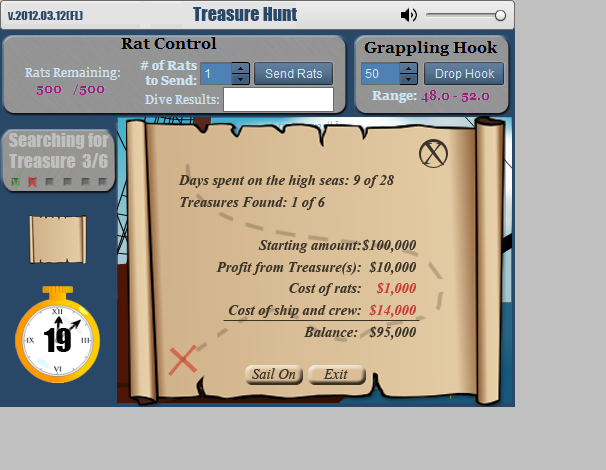
<style>
.page{position:relative;width:606px;height:470px;background:#c0c0c0}
.page>*{position:absolute;margin:0}
.t1{font:12px "Impact";color:#294867}
.t2{font:18px "Impact";color:#294867}
.t3{font:18px "Impact";color:#c0c0c0}
.t4{font:30px "CharlemagneStd-Bold";color:#3a3328}
.t5{font:18px "MyriadPro-Regular";color:#55b948}
.t6{font:20px "MyriadPro-Regular";color:#ef2f2f}
.t7{font:18px "Vijaya-Bold";color:#3a3328}
.t8{font:18px "Vijaya-Bold";color:#c93b34}
.t9{font:30px "Impact";color:#000000}
.t10{font:39.7px "LithosPro-Regular";color:#d16b4d;scale:1.13 1}
.t11{font:18px "Vijaya";color:#3a3328}
</style>
<div class="page">
<p class="t1" style="left:8px;top:11px;width:75px;height:9px">v.2012.03.12(FL)</p>
<p class="t2" style="left:193px;top:7px;width:104px;height:14px">Treasure Hunt</p>
<p class="t3" style="left:9px;top:133px;width:100px;height:35px;text-align:center">Searching for<br>Treasure  3/6</p>
<p class="t4" style="left:422px;top:143px;width:23px;height:23px">X</p>
<p class="t5" style="left:11px;top:171px;width:10px;height:17px">√</p>
<p class="t6" style="left:28px;top:177px;width:9px;height:10px">x</p>
<p class="t7" style="left:178px;top:175px;width:238px;height:165px">Days spent on the high seas: 9 of 28<br>Treasures Found: 1 of 6<br><br>Starting amount:$100,000<br>Profit from Treasure(s):  $10,000<br>Cost of rats:    <span class="t8">$1,000<br></span>Cost of ship and crew:  <span class="t8">$14,000<br></span>Balance:   $95,000</p>
<p class="t9" style="left:44px;top:328px;width:27px;height:24px">19</p>
<p class="t10" style="left:168px;top:344px;width:30px;height:32px;rotate:-7deg">X</p>
<p class="t11" style="left:252px;top:368px;width:96px;height:11px">Sail On Exit</p>
</div>
